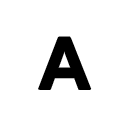
<style>
.page{position:relative;width:128px;height:128px;background:#ffffff}
.page>*{position:absolute;margin:0}
.t1{font:72px "Arial-BoldMT";letter-spacing:0.02em;color:#000000}
</style>
<div class="page">
<p class="t1" style="left:39px;top:37px;width:52px;height:52px">A</p>
</div>
